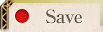
<style>
.page{position:relative;width:103px;height:32px}
.page>*{position:absolute;margin:0}
.t1{font:18px "RyuminPro-ExBold";letter-spacing:-0.04em;color:#625747}
</style>
<div class="page">
<p class="t1" style="left:46px;top:9px;width:36px;height:15px">Save</p>
</div>
